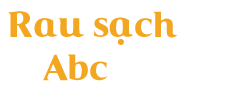
<style>
.page{position:relative;width:225px;height:100px;background:#ffffff}
.page>*{position:absolute;margin:0}
.t1{font:36px "Coke4U";color:#f3a61f}
</style>
<div class="page">
<p class="t1" style="left:8px;top:11px;width:170px;height:70px">Rau sạch<br>    Abc</p>
</div>
